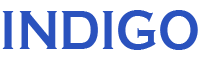
<style>
.page{position:relative;width:200px;height:60px;background:#ffffff}
.page>*{position:absolute;margin:0}
.t1{font:55.5px "CopperplateGothic-Bold";color:#2a52be;scale:0.88 1}
</style>
<div class="page">
<p class="t1" style="left:2px;top:10px;width:196px;height:40px">INDIGO</p>
</div>
